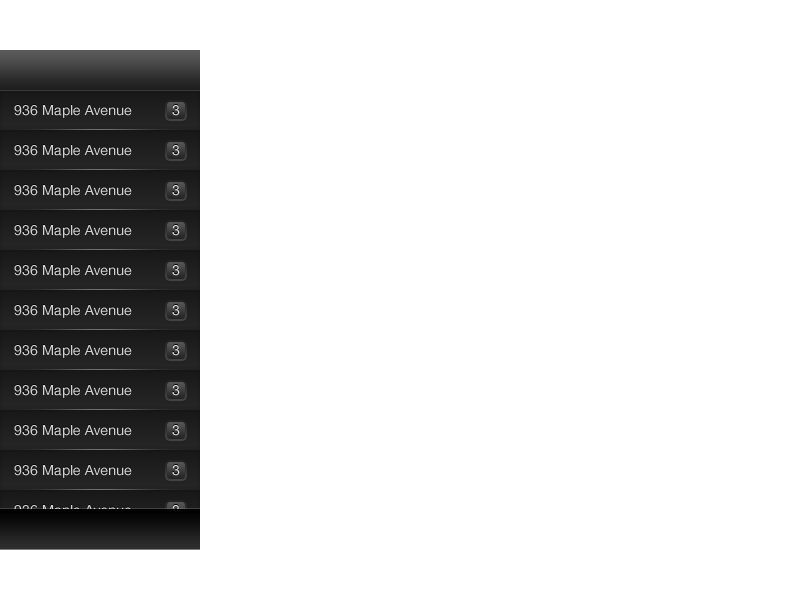
<style>
.page{position:relative;width:800px;height:600px;background:#ffffff}
.page>*{position:absolute;margin:0}
.t1{font:14px "HelveticaNeue";color:#d1d1d1}
.t2{font:14px "HelveticaNeue";color:#dedddd}
</style>
<div class="page">
<p class="t1" style="left:14px;top:105px;width:118px;height:13px">936 Maple Avenue</p>
<p class="t2" style="left:172px;top:105px;width:8px;height:11px">3</p>
<p class="t1" style="left:14px;top:145px;width:118px;height:13px">936 Maple Avenue</p>
<p class="t2" style="left:172px;top:145px;width:8px;height:11px">3</p>
<p class="t1" style="left:14px;top:185px;width:118px;height:13px">936 Maple Avenue</p>
<p class="t2" style="left:172px;top:185px;width:8px;height:11px">3</p>
<p class="t1" style="left:14px;top:225px;width:118px;height:13px">936 Maple Avenue</p>
<p class="t2" style="left:172px;top:225px;width:8px;height:11px">3</p>
<p class="t1" style="left:14px;top:265px;width:118px;height:13px">936 Maple Avenue</p>
<p class="t2" style="left:172px;top:265px;width:8px;height:11px">3</p>
<p class="t1" style="left:14px;top:305px;width:118px;height:13px">936 Maple Avenue</p>
<p class="t2" style="left:172px;top:305px;width:8px;height:11px">3</p>
<p class="t1" style="left:14px;top:345px;width:118px;height:13px">936 Maple Avenue</p>
<p class="t2" style="left:172px;top:345px;width:8px;height:11px">3</p>
<p class="t1" style="left:14px;top:385px;width:118px;height:13px">936 Maple Avenue</p>
<p class="t2" style="left:172px;top:385px;width:8px;height:11px">3</p>
<p class="t1" style="left:14px;top:425px;width:118px;height:13px">936 Maple Avenue</p>
<p class="t2" style="left:172px;top:425px;width:8px;height:11px">3</p>
<p class="t1" style="left:14px;top:465px;width:118px;height:13px">936 Maple Avenue</p>
<p class="t2" style="left:172px;top:465px;width:8px;height:11px">3</p>
</div>
